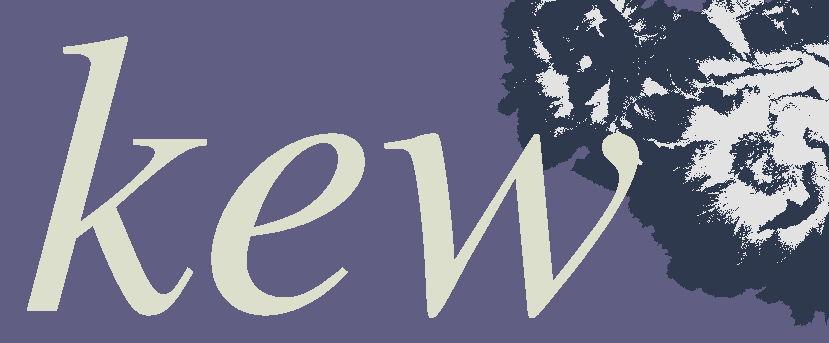
<style>
.page{position:relative;width:829px;height:343px;background:#605f83}
.page>*{position:absolute;margin:0}
.t1{font:402.3px "TeXGyreTermes-Italic";color:#dcdfcc}
</style>
<div class="page">
<p class="t1" style="left:26px;top:36px;width:613px;height:283px">kew</p>
</div>
